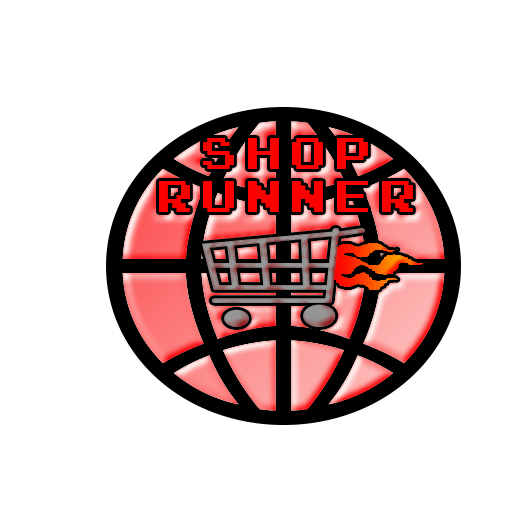
<style>
.page{position:relative;width:512px;height:512px;background:#ffffff}
.page>*{position:absolute;margin:0}
.t1{font:36px "ArcadeNormal";letter-spacing:0.26em;color:#fe0000}
</style>
<div class="page">
<p class="t1" style="left:159px;top:138px;width:254px;height:74px;text-align:center">sHOP rUNNER</p>
</div>
